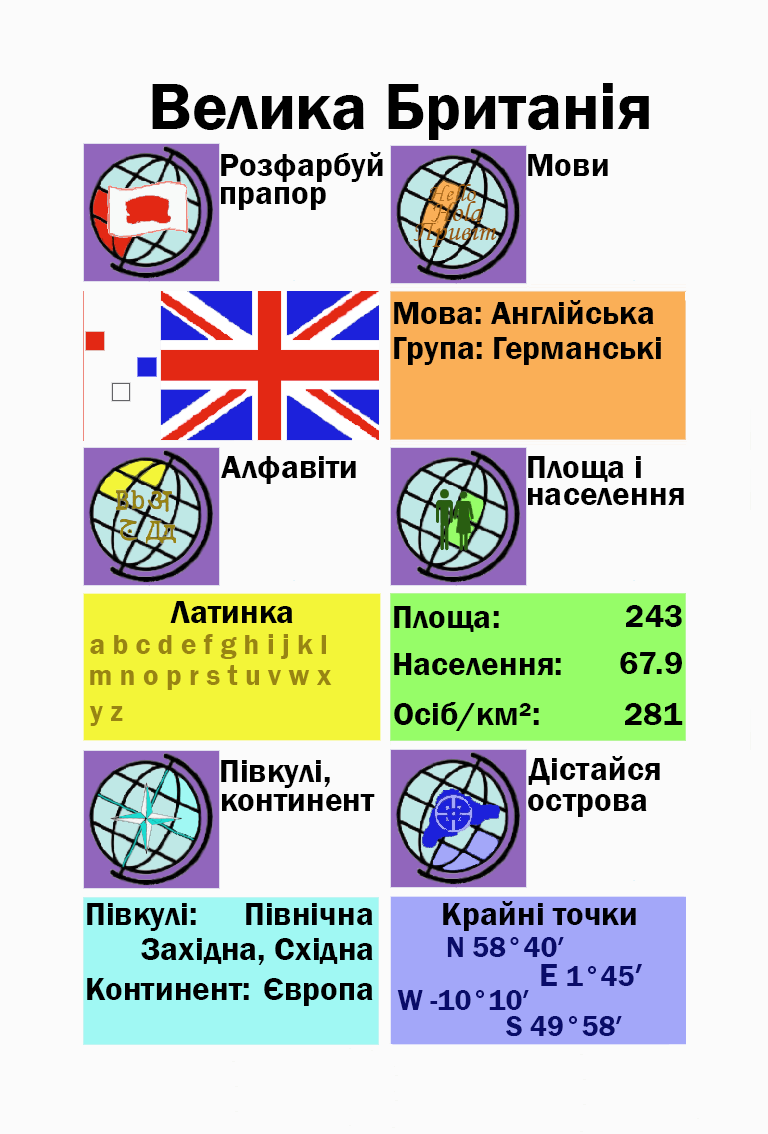
<style>
.page{position:relative;width:768px;height:1134px;background:#fbfbfb}
.page>*{position:absolute;margin:0}
.t1{font:66.7px "FranklinGothic-Demi";color:#000000}
.t2{font:33.3px "FranklinGothic-Demi";color:#000000}
.t3{font:33.3px "FranklinGothic-Demi";color:#000003}
.t4{font:29.2px "FranklinGothic-Demi";color:#988413}
.t5{font:29.2px "FranklinGothic-Demi";color:#090c69}
.t6{font:33.3px "FranklinGothic-Demi";color:#090c69}
</style>
<div class="page">
<p class="t1" style="left:152px;top:83px;width:497px;height:57px">Велика Британія</p>
<p class="t2" style="left:221px;top:152px;width:162px;height:30px">Розфарбуй</p>
<p class="t2" style="left:528px;top:154px;width:80px;height:22px">Мови</p>
<p class="t2" style="left:221px;top:187px;width:105px;height:23px">прапор</p>
<p class="t2" style="left:394px;top:300px;width:260px;height:24px">Мова: Англійська</p>
<p class="t2" style="left:394px;top:337px;width:267px;height:28px">Група: Германські</p>
<p class="t2" style="left:221px;top:456px;width:135px;height:28px">Алфавіти</p>
<p class="t2" style="left:528px;top:456px;width:113px;height:26px">Площа і</p>
<p class="t2" style="left:528px;top:488px;width:156px;height:17px">населення</p>
<p class="t2" style="left:170px;top:601px;width:123px;height:22px">Латинка</p>
<p class="t2" style="left:394px;top:606px;width:105px;height:26px">Площа:</p>
<p class="t3" style="left:626px;top:605px;width:56px;height:22px">243</p>
<p class="t4" style="left:90px;top:634px;width:236px;height:25px">a b c d e f g h i j k l</p>
<p class="t2" style="left:394px;top:653px;width:167px;height:22px">Населення:</p>
<p class="t2" style="left:620px;top:652px;width:62px;height:22px">67.9</p>
<p class="t4" style="left:90px;top:665px;width:242px;height:25px">m n o p r s t u v w x</p>
<p class="t2" style="left:394px;top:702px;width:145px;height:29px">Осіб/км²:</p>
<p class="t4" style="left:89px;top:706px;width:34px;height:20px">y z</p>
<p class="t2" style="left:625px;top:703px;width:58px;height:22px">281</p>
<p class="t2" style="left:221px;top:760px;width:109px;height:28px">Півкулі,</p>
<p class="t2" style="left:528px;top:756px;width:132px;height:29px">Дістайся</p>
<p class="t2" style="left:222px;top:794px;width:153px;height:17px">континент</p>
<p class="t2" style="left:528px;top:794px;width:119px;height:23px">острова</p>
<p class="t2" style="left:87px;top:903px;width:109px;height:28px">Півкулі:</p>
<p class="t2" style="left:246px;top:903px;width:127px;height:22px">Північна</p>
<p class="t3" style="left:443px;top:901px;width:193px;height:30px">Крайні точки</p>
<p class="t2" style="left:141px;top:938px;width:232px;height:27px">Західна, Східна</p>
<p class="t5" style="left:447px;top:937px;width:117px;height:20px">N 58°40′</p>
<p class="t5" style="left:541px;top:964px;width:101px;height:22px"><span class="t6">E </span>1°45<span class="t6">′</span></p>
<p class="t2" style="left:87px;top:978px;width:162px;height:22px">Континент:</p>
<p class="t2" style="left:264px;top:978px;width:109px;height:28px">Європа</p>
<p class="t5" style="left:397px;top:990px;width:132px;height:20px">W -10°10′</p>
<p class="t5" style="left:506px;top:1016px;width:116px;height:21px">S 49°58′</p>
</div>
